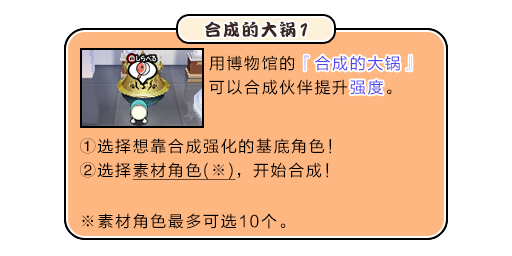
<style>
.page{position:relative;width:512px;height:256px;background:#ffb782}
.page>*{position:absolute;margin:0}
.t1{font:17px "DFPKanTingLiuW9";letter-spacing:0.1em;color:#3b2626}
.t2{font:19.5px "DFPKanTingLiuW9";letter-spacing:0.1em;color:#3b2626;scale:0.87 1}
.t3{font:16px/24px "FZLTHJW--GB1-0";letter-spacing:0.1em;color:#000000}
.t4{font:16px/24px "FZLTHJW--GB1-0";letter-spacing:0.1em;color:#5444ed}
.t5{font:16px "FZLTHJW--GB1-0";letter-spacing:0.1em;color:#5444ed}
.t6{font:16px/24px "FZLTHJW--GB1-0";letter-spacing:0.1em;color:#000000;text-decoration:underline}
.t7{font:16px "FZLTHJW--GB1-0";letter-spacing:0.1em;color:#000000}
</style>
<div class="page">
<p class="t1" style="left:205px;top:21px;width:103px;height:17px">合成的大锅<span class="t2">1</span></p>
<p class="t3" style="left:209px;top:55px;width:203px;height:40px">用博物馆的<span class="t4">『合成的大锅』<br></span>可以合成伙伴提升<span class="t4">强度</span>。</p>
<p class="t5" style="left:304px;top:55px;width:108px;height:16px">『合成的大锅』</p>
<p class="t5" style="left:350px;top:79px;width:33px;height:16px">强度</p>
<p class="t3" style="left:80px;top:138px;width:252px;height:42px">①选择想靠合成强化的基底角色！<br>②选择<span class="t6">素材角色(※)</span>，开始合成！</p>
<p class="t7" style="left:82px;top:213px;width:204px;height:16px">※素材角色最多可选10个。</p>
</div>
